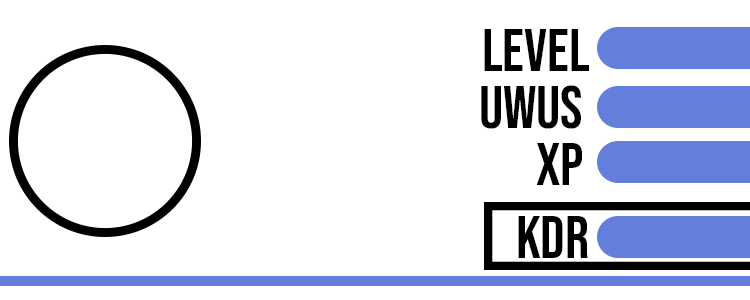
<style>
.page{position:relative;width:750px;height:300px;background:#ffffff}
.page>*{position:absolute;margin:0}
.t1{font:60px "BebasNeue-Regular";color:#000000}
</style>
<div class="page">
<p class="t1" style="left:484px;top:29px;width:105px;height:42px">level</p>
<p class="t1" style="left:481px;top:85px;width:100px;height:44px">uwus</p>
<p class="t1" style="left:536px;top:143px;width:46px;height:42px">XP</p>
<p class="t1" style="left:518px;top:216px;width:70px;height:42px">KDr</p>
</div>
